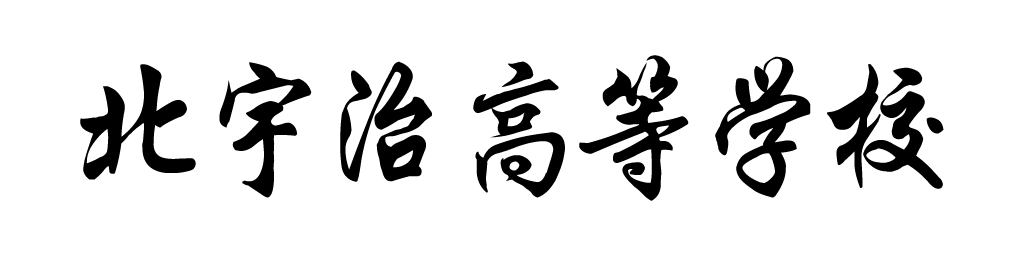
<style>
.page{position:relative;width:1024px;height:256px;background:#ffffff}
.page>*{position:absolute;margin:0}
.t1{font:140px "HGXK_CNKI";letter-spacing:-0.1em;color:#000000}
</style>
<div class="page">
<p class="t1" style="left:80px;top:55px;width:864px;height:146px">北宇治高等学校</p>
</div>
